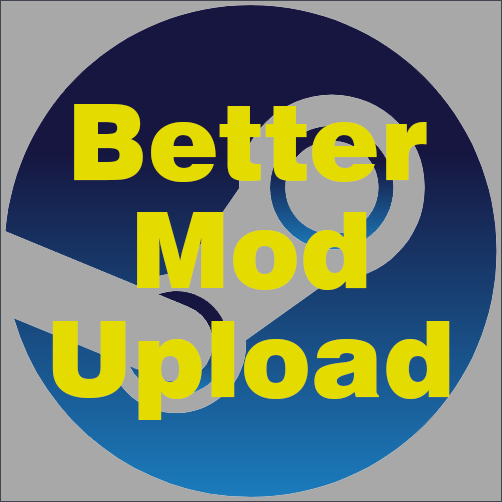
<style>
.page{position:relative;width:502px;height:502px;background:#a8a8a8}
.page>*{position:absolute;margin:0}
.t1{font:106.1px "Swiss721BT-Black";color:#e4dc00}
</style>
<div class="page">
<p class="t1" style="left:74px;top:104px;width:353px;height:78px">Better</p>
<p class="t1" style="left:137px;top:212px;width:230px;height:78px">Mod</p>
<p class="t1" style="left:52px;top:321px;width:398px;height:99px">Upload</p>
</div>
